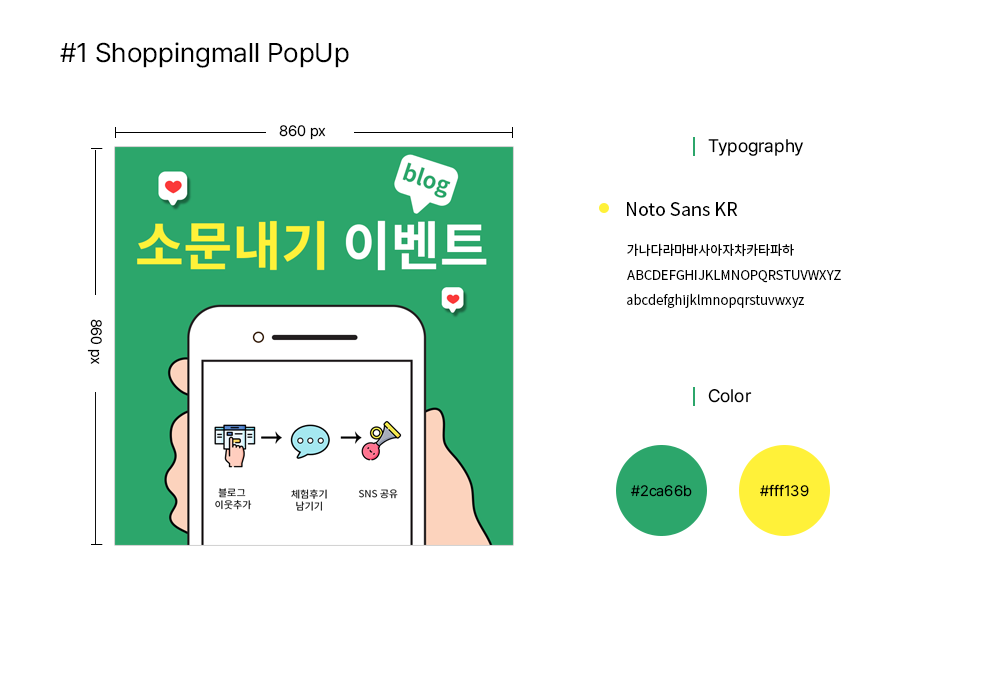
<style>
.page{position:relative;width:1000px;height:700px;background:#ffffff}
.page>*{position:absolute;margin:0}
.t1{font:27px "Pretendard-Regular";color:#000000}
.t2{font:15px "Pretendard-Regular";color:#000000}
.t3{font:18px "Pretendard-Regular";color:#000000}
.t4{font:18px "NotoSansKR-Regular";color:#000000}
.t5{font:13px "NotoSansKR-Regular";color:#000000}
</style>
<div class="page">
<p class="t1" style="left:60px;top:42px;width:289px;height:26px">#1 Shoppingmall PopUp</p>
<p class="t2" style="left:279px;top:125px;width:47px;height:15px">860 px</p>
<p class="t3" style="left:708px;top:139px;width:96px;height:17px">Typography</p>
<p class="t4" style="left:627px;top:202px;width:111px;height:14px">Noto Sans KR</p>
<p class="t5" style="left:627px;top:243px;width:167px;height:14px">가나다라마바사아자차카타파하</p>
<p class="t5" style="left:627px;top:270px;width:214px;height:13px">ABCDEFGHIJKLMNOPQRSTUVWXYZ</p>
<p class="t5" style="left:627px;top:293px;width:177px;height:15px">abcdefghijklmnopqrstuvwxyz</p>
<p class="t2" style="left:87px;top:319px;width:15px;height:45px;rotate:90deg">860 px</p>
<p class="t3" style="left:708px;top:389px;width:44px;height:14px">Color</p>
<p class="t2" style="left:631px;top:485px;width:61px;height:12px">#2ca66b</p>
<p class="t2" style="left:760px;top:484px;width:49px;height:13px">#fff139</p>
</div>
